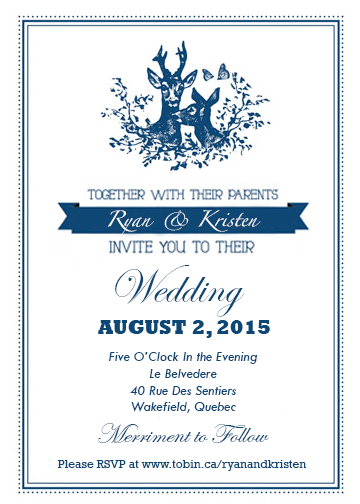
<style>
.page{position:relative;width:360px;height:504px;background:#ffffff}
.page>*{position:absolute;margin:0}
.t1{font:14px "Zapfino";color:#ffffff}
.t2{font:12.6px "Zapfino";color:#ffffff}
.t3{font:48px "EdwardianScriptITC";color:#0f4774}
.t4{font:14px "TwCenMT-Italic";color:#0f4774}
.t5{font:28px "EdwardianScriptITC";color:#0f4774}
.t6{font:12px "Rockwell";color:#0f4774}
</style>
<div class="page">
<p class="t1" style="left:107px;top:210px;width:154px;height:31px;text-align:center">Ryan<span class="t2">  &amp; </span>Kristen</p>
<p class="t3" style="left:115px;top:265px;width:130px;height:52px">Wedding</p>
<p class="t4" style="left:109px;top:352px;width:149px;height:61px;text-align:center">Five O’Clock In the Evening<br>Le Belvedere<br>40 Rue Des Sentiers<br>Wakefield, Quebec</p>
<p class="t5" style="left:98px;top:423px;width:171px;height:20px">Merriment to Follow</p>
<p class="t6" style="left:57px;top:460px;width:250px;height:11px">Please RSVP at www.tobin.ca/ryanandkristen</p>
</div>
